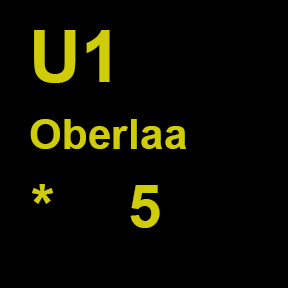
<style>
.page{position:relative;width:288px;height:288px;background:#000000}
.page>*{position:absolute;margin:0}
.t1{font:72px "Arial-BoldMT";letter-spacing:0.01em;color:#d0cd08}
.t2{font:42px "Arial-BoldMT";letter-spacing:0.01em;color:#d0cd08}
.t3{font:60px "Arial-BoldMT";letter-spacing:0.01em;color:#d0cd08}
</style>
<div class="page">
<p class="t1" style="left:34px;top:30px;width:76px;height:53px">U1</p>
<p class="t2" style="left:30px;top:119px;width:156px;height:30px">Oberlaa</p>
<p class="t3" style="left:32px;top:184px;width:21px;height:20px">*</p>
<p class="t3" style="left:130px;top:185px;width:30px;height:43px">5</p>
</div>
